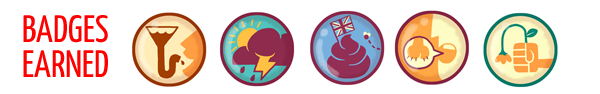
<style>
.page{position:relative;width:600px;height:94px;background:#ffffff}
.page>*{position:absolute;margin:0}
.t1{font:38.2px/34.7px "YanoneKaffeesatz-Regular";color:#ff0000;text-transform:uppercase}
</style>
<div class="page">
<p class="t1" style="left:23px;top:15px;width:85px;height:62px">Badges<br>earned</p>
</div>
